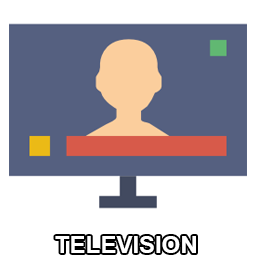
<style>
.page{position:relative;width:256px;height:256px;background:#ffffff}
.page>*{position:absolute;margin:0}
.t1{font:24px "Arial-BoldMT";color:#ffffff}
</style>
<div class="page">
<p class="t1" style="left:55px;top:236px;width:141px;height:17px">TELEVISION</p>
</div>
